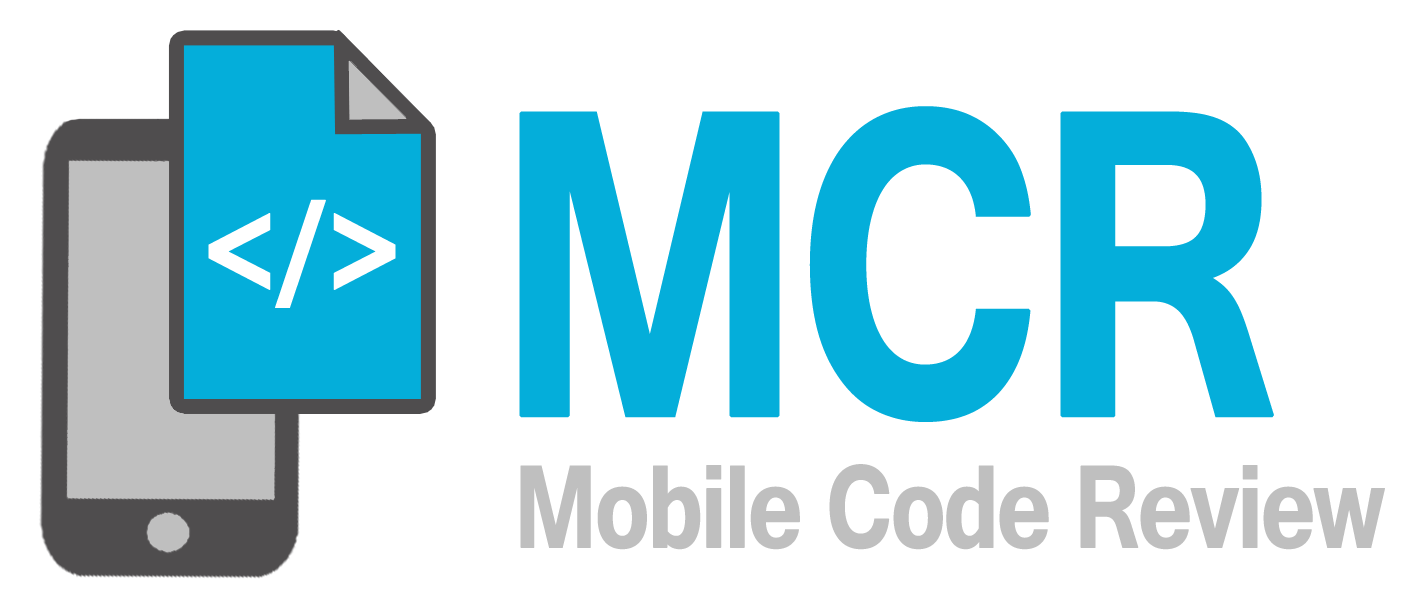
<style>
.page{position:relative;width:1412px;height:603px;background:#ffffff}
.page>*{position:absolute;margin:0}
.t1{font:541.7px "Tunga-Bold";letter-spacing:-0.042em;color:#04aeda;font-weight:bold;scale:0.8 1}
.t2{font:116.7px "Verdana-Bold";letter-spacing:-0.142em;color:#ffffff;font-weight:bold;scale:0.8 1}
.t3{font:145.8px "Tunga-Bold";letter-spacing:-0.042em;color:#bfbfbf;font-weight:bold;scale:0.8 1}
</style>
<div class="page">
<p class="t1" style="left:519px;top:106px;width:755px;height:316px">MCR</p>
<p class="t2" style="left:208px;top:199px;width:188px;height:109px">&lt;/&gt;</p>
<p class="t3" style="left:520px;top:464px;width:865px;height:86px">Mobile Code Review</p>
</div>
